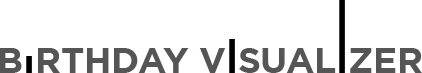
<style>
.page{position:relative;width:422px;height:73px;background:#ffffff}
.page>*{position:absolute;margin:0}
.t1{font:36px "GothamBold";color:#434343}
.t2{font:36px "GothamBold";color:#ffffff}
</style>
<div class="page">
<p class="t1" style="left:0px;top:48px;width:422px;height:25px;opacity:0.9">B<span class="t2">I</span>RTHDAY V<span class="t2">I</span>SUAL<span class="t2">I</span>ZER</p>
</div>
